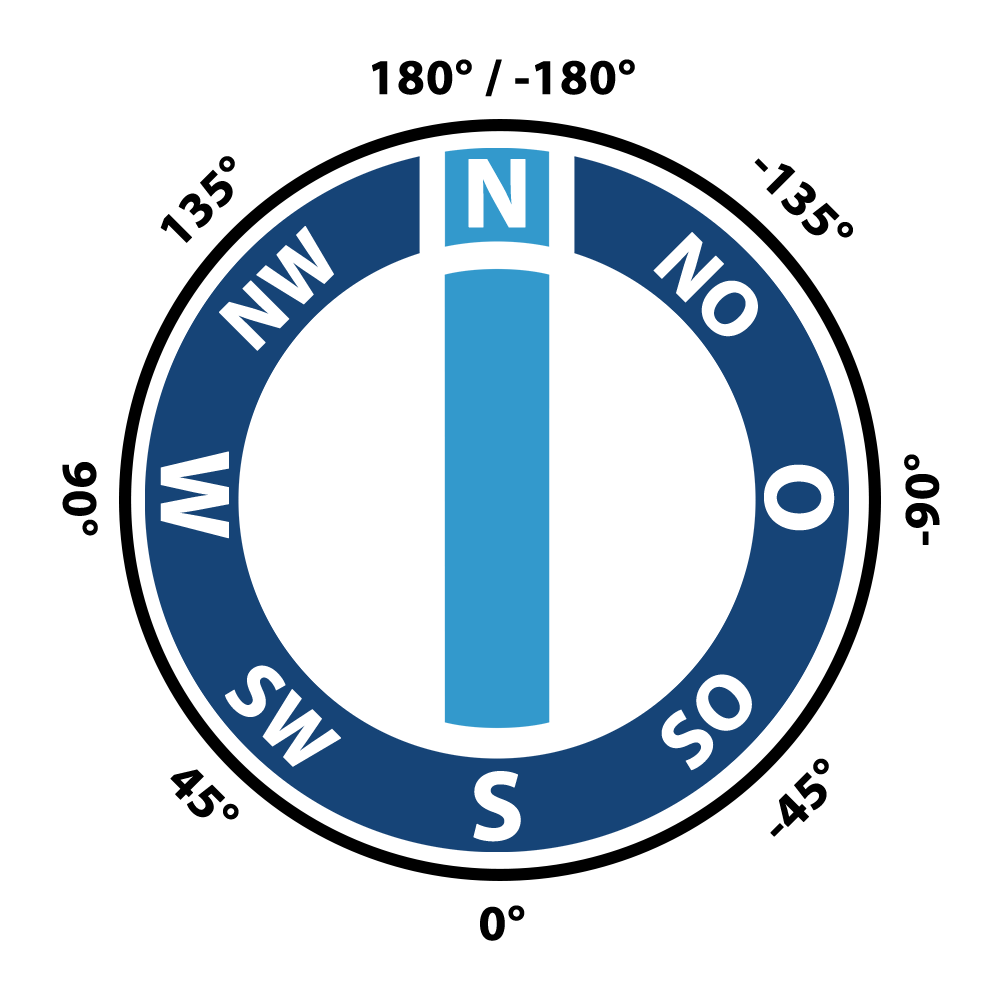
<style>
.page{position:relative;width:1000px;height:1000px;background:#ffffff}
.page>*{position:absolute;margin:0}
.t1{font:50px "MyriadPro-Bold";color:#000000;font-weight:bold}
.t2{font:100px "MyriadPro-Bold";color:#ffffff;font-weight:bold}
.t3{font:80px "MyriadPro-Bold";color:#ffffff;font-weight:bold}
</style>
<div class="page">
<p class="t1" style="left:372px;top:59px;width:263px;height:38px">180° / -180°</p>
<p class="t1" style="left:160px;top:156px;width:75px;height:87px;rotate:-45deg">135°</p>
<p class="t2" style="left:468px;top:159px;width:58px;height:69px">N</p>
<p class="t1" style="left:754px;top:158px;width:99px;height:80px;rotate:45deg">-135°</p>
<p class="t3" style="left:219px;top:226px;width:115px;height:125px;rotate:-45deg">NW</p>
<p class="t3" style="left:653px;top:232px;width:105px;height:105px;rotate:45deg">NO</p>
<p class="t1" style="left:62px;top:462px;width:36px;height:74px;rotate:90deg">90°</p>
<p class="t2" style="left:160px;top:451px;width:69px;height:88px;rotate:90deg">W</p>
<p class="t1" style="left:904px;top:454px;width:36px;height:91px;rotate:-90deg">-90°</p>
<p class="t2" style="left:764px;top:464px;width:71px;height:67px;rotate:-90deg">O</p>
<p class="t3" style="left:225px;top:665px;width:116px;height:102px;rotate:45deg">SW</p>
<p class="t3" style="left:661px;top:674px;width:91px;height:97px;rotate:-45deg">SO</p>
<p class="t1" style="left:770px;top:758px;width:59px;height:79px;rotate:-45deg">-45°</p>
<p class="t1" style="left:170px;top:769px;width:69px;height:51px;rotate:45deg">45°</p>
<p class="t2" style="left:473px;top:771px;width:48px;height:71px">S</p>
<p class="t1" style="left:480px;top:905px;width:45px;height:36px">0°</p>
</div>
